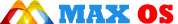
<style>
.page{position:relative;width:178px;height:24px;background:#ffffff}
.page>*{position:absolute;margin:0}
.t1{font:27px "Rockwell-ExtraBold";color:#1d8fe7;scale:0.93 1}
.t2{font:27px "Rockwell-ExtraBold";color:#fd0000;scale:0.93 1}
</style>
<div class="page">
<p class="t1" style="left:59px;top:4px;width:115px;height:20px">MAX <span class="t2">OS</span></p>
</div>
